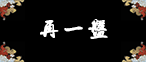
<style>
.page{position:relative;width:146px;height:62px;background:#000000}
.page>*{position:absolute;margin:0}
.t1{font:23.8px "SunYatsenHsingshu-";color:#ffffff;font-weight:bold}
</style>
<div class="page">
<p class="t1" style="left:40px;top:19px;width:68px;height:20px">再一盘</p>
</div>
